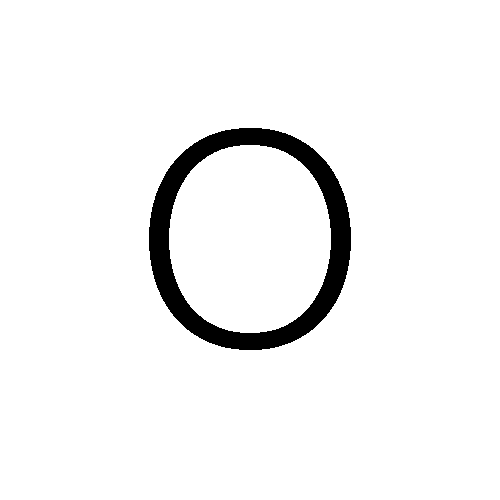
<style>
.page{position:relative;width:500px;height:500px;background:#ffffff}
.page>*{position:absolute;margin:0}
.t1{font:300px "HelveticaNeue-Light";color:#000000}
</style>
<div class="page">
<p class="t1" style="left:149px;top:128px;width:202px;height:222px">O</p>
</div>
